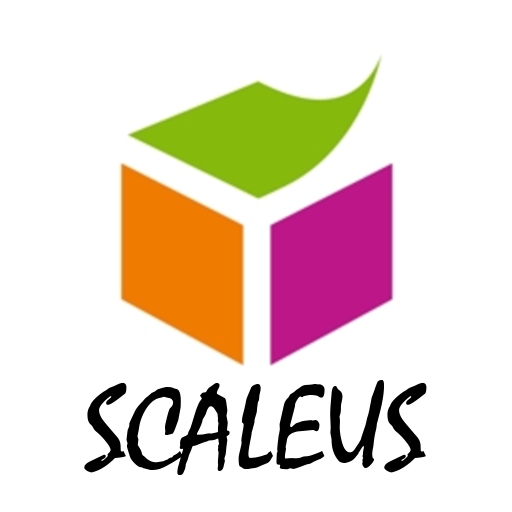
<style>
.page{position:relative;width:512px;height:512px;background:#ffffff}
.page>*{position:absolute;margin:0}
.t1{font:120px "Mistral";color:#000000}
</style>
<div class="page">
<p class="t1" style="left:84px;top:380px;width:343px;height:95px">SCALEUS</p>
</div>
